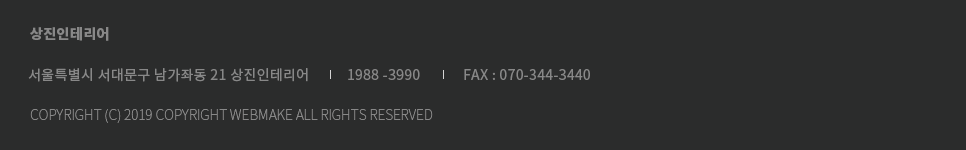
<style>
.page{position:relative;width:966px;height:150px;background:#2b2c2c}
.page>*{position:absolute;margin:0}
.t1{font:14px "NotoSansCJKkr-Black";letter-spacing:0.03em;color:#888888}
.t2{font:14px "NotoSansCJKkr-Regular";letter-spacing:0.025em;color:#888888}
.t3{font:14px "NotoSansCJKkr-Thin";letter-spacing:-0.01em;color:#888888}
</style>
<div class="page">
<p class="t1" style="left:30px;top:27px;width:79px;height:14px">상진인테리어</p>
<p class="t2" style="left:28px;top:68px;width:280px;height:14px">서울특별시 서대문구 남가좌동 21 상진인테리어</p>
<p class="t2" style="left:348px;top:69px;width:72px;height:11px">1988 -3990</p>
<p class="t2" style="left:464px;top:69px;width:126px;height:11px">FAX : 070-344-3440</p>
<p class="t3" style="left:30px;top:109px;width:403px;height:14px">COPYRIGHT (C) 2019 COPYRIGHT WEBMAKE ALL RIGHTS RESERVED</p>
</div>
